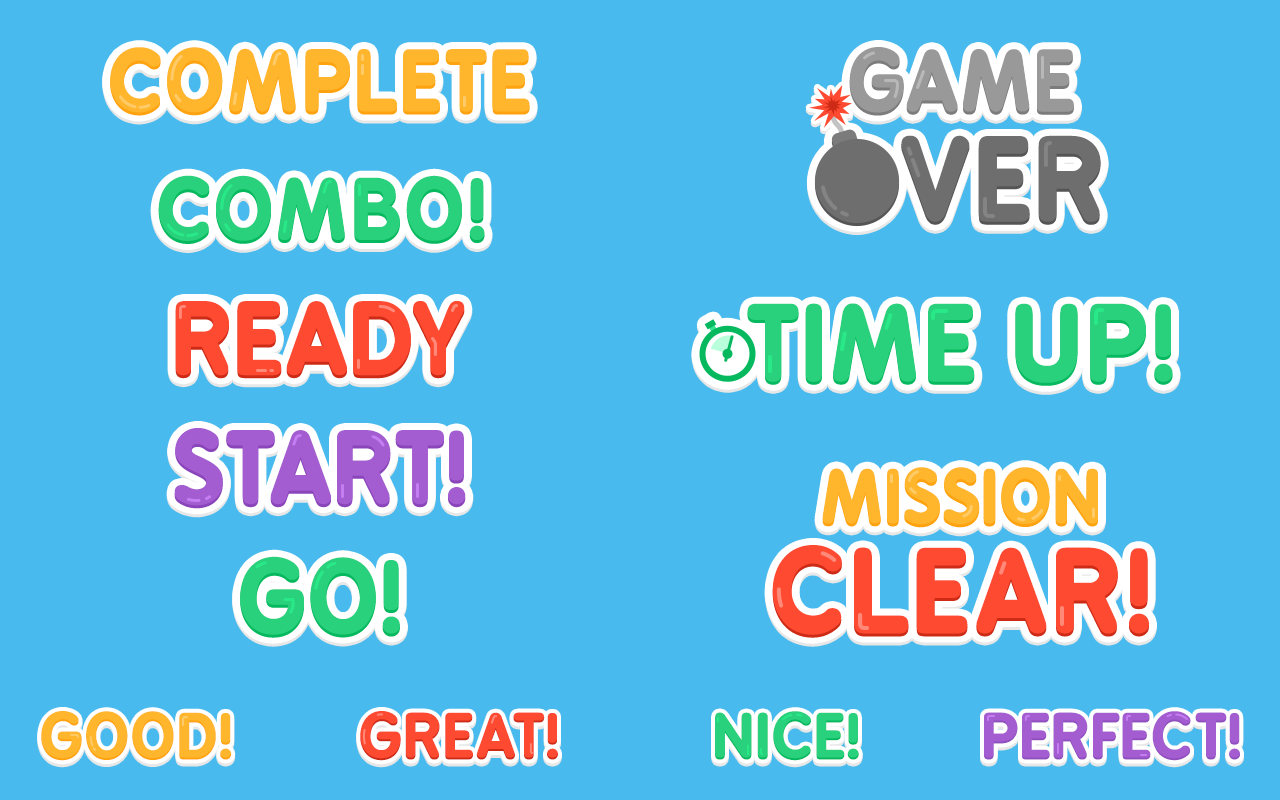
<style>
.page{position:relative;width:1280px;height:800px;background:#48baed}
.page>*{position:absolute;margin:0}
.t1{font:80px "BPreplay-Bold";letter-spacing:0.05em;color:#ffb62c}
.t2{font:80px "BPreplay-Bold";letter-spacing:0.025em;color:#999999}
.t3{font:110px "BPreplay-Bold";letter-spacing:0.05em;color:#6e6e6e}
.t4{font:80px "BPreplay-Bold";letter-spacing:0.05em;color:#29d17c}
.t5{font:95px "BPreplay-Bold";letter-spacing:0.025em;color:#ff4a32}
.t6{font:100px "BPreplay-Bold";letter-spacing:0.05em;color:#29d17c}
.t7{font:95px "BPreplay-Bold";letter-spacing:0.025em;color:#a35dd0}
.t8{font:70px "BPreplay-Bold";letter-spacing:0.025em;color:#ffb62c}
.t9{font:110px "BPreplay-Bold";letter-spacing:0.05em;color:#ff4a32}
.t10{font:95px "BPreplay-Bold";letter-spacing:0.025em;color:#29d17c}
.t11{font:60px "BPreplay-Bold";letter-spacing:0.03em;color:#ffb62c}
.t12{font:60px "BPreplay-Bold";letter-spacing:0.03em;color:#ff4a32}
.t13{font:60px "BPreplay-Bold";letter-spacing:0.03em;color:#29d17c}
.t14{font:60px "BPreplay-Bold";letter-spacing:0.03em;color:#a35dd0}
</style>
<div class="page">
<p class="t1" style="left:110px;top:48px;width:420px;height:66px">COMPLETE</p>
<p class="t1" style="left:110px;top:47px;width:420px;height:66px">COMPLETE</p>
<p class="t2" style="left:849px;top:48px;width:225px;height:66px">GAME</p>
<p class="t2" style="left:849px;top:47px;width:225px;height:66px">GAME</p>
<p class="t3" style="left:901px;top:136px;width:200px;height:87px">VER</p>
<p class="t3" style="left:901px;top:135px;width:200px;height:87px">VER</p>
<p class="t4" style="left:158px;top:176px;width:327px;height:66px">COMBO!</p>
<p class="t4" style="left:158px;top:175px;width:327px;height:66px">COMBO!</p>
<p class="t5" style="left:175px;top:302px;width:290px;height:75px">READY</p>
<p class="t5" style="left:175px;top:301px;width:290px;height:75px">READY</p>
<p class="t6" style="left:747px;top:304px;width:426px;height:80px">TIME UP!</p>
<p class="t6" style="left:747px;top:303px;width:426px;height:80px">TIME UP!</p>
<p class="t7" style="left:174px;top:429px;width:292px;height:78px">START!</p>
<p class="t7" style="left:174px;top:428px;width:292px;height:78px">START!</p>
<p class="t8" style="left:822px;top:468px;width:276px;height:58px">MISSION</p>
<p class="t8" style="left:822px;top:467px;width:276px;height:58px">MISSION</p>
<p class="t9" style="left:772px;top:545px;width:377px;height:90px">CLEAR!</p>
<p class="t10" style="left:240px;top:557px;width:160px;height:79px">GO!</p>
<p class="t10" style="left:240px;top:556px;width:160px;height:79px">GO!</p>
<p class="t9" style="left:772px;top:546px;width:377px;height:90px">CLEAR!</p>
<p class="t11" style="left:41px;top:711px;width:191px;height:50px">GOOD!</p>
<p class="t12" style="left:360px;top:711px;width:198px;height:50px">GREAT!</p>
<p class="t13" style="left:715px;top:711px;width:144px;height:50px">NICE!</p>
<p class="t14" style="left:984px;top:711px;width:256px;height:50px">PERFECT!</p>
</div>
